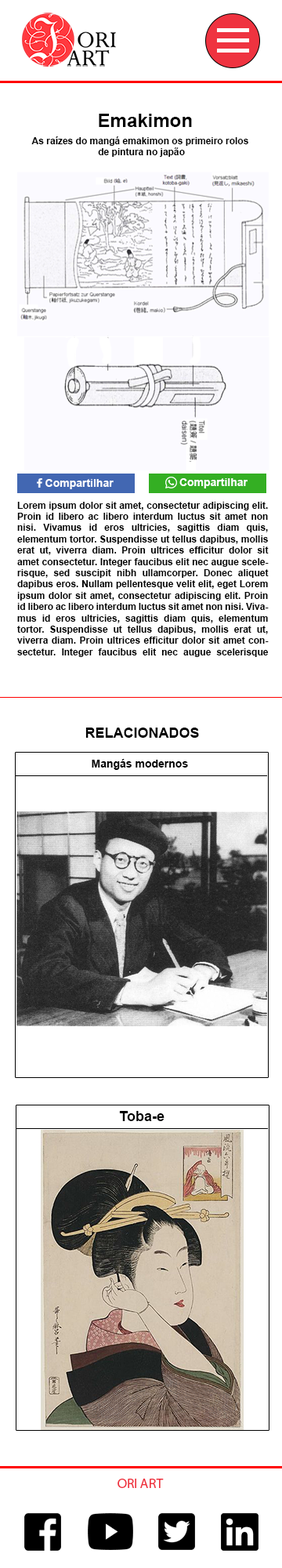
<style>
.page{position:relative;width:282px;height:1568px;background:#ffffff}
.page>*{position:absolute;margin:0}
.t1{font:18.8px "Arial-BoldMT";color:#000000}
.t2{font:9.4px "Arial-BoldMT";color:#000000}
.t3{font:11px "Arial-BoldMT";color:#ffffff}
.t4{font:14.1px "Arial-BoldMT";color:#000000}
.t5{font:11px "Arial-BoldMT";color:#000000}
</style>
<div class="page">
<p class="t1" style="left:99px;top:114px;width:93px;height:13px">Emakimon</p>
<p class="t2" style="left:31px;top:136px;width:218px;height:21px;text-align:center">As raízes do mangá emakimon os primeiro rolos <br>de pintura no japão</p>
<p class="t3" style="left:45px;top:479px;width:69px;height:10px">Compartilhar</p>
<p class="t3" style="left:180px;top:478px;width:68px;height:10px">Compartilhar</p>
<p class="t2" style="left:17px;top:502px;width:252px;height:155px;text-align:justify">Lorem ipsum dolor sit amet, consectetur adipiscing elit. Proin id libero ac libero interdum luctus sit amet non nisi. Vivamus id eros ultricies, sagittis diam quis, elementum tortor. Suspendisse ut tellus dapibus, mollis erat ut, viverra diam. Proin ultrices efficitur dolor sit amet consectetur. Integer faucibus elit nec augue scelerisque, sed suscipit nibh ullamcorper. Donec aliquet dapibus eros. Nullam pellentesque velit elit, eget Lorem ipsum dolor sit amet, consectetur adipiscing elit. Proin id libero ac libero interdum luctus sit amet non nisi. Vivamus id eros ultricies, sagittis diam quis, elementum tortor. Suspendisse ut tellus dapibus, mollis erat ut, viverra diam. Proin ultrices efficitur dolor sit amet consectetur. Integer faucibus elit nec augue scelerisque</p>
<p class="t4" style="left:85px;top:728px;width:114px;height:10px">RELACIONADOS</p>
<p class="t5" style="left:92px;top:759px;width:96px;height:11px">Mangás modernos</p>
<p class="t4" style="left:119px;top:1111px;width:46px;height:10px">Toba-e</p>
</div>
